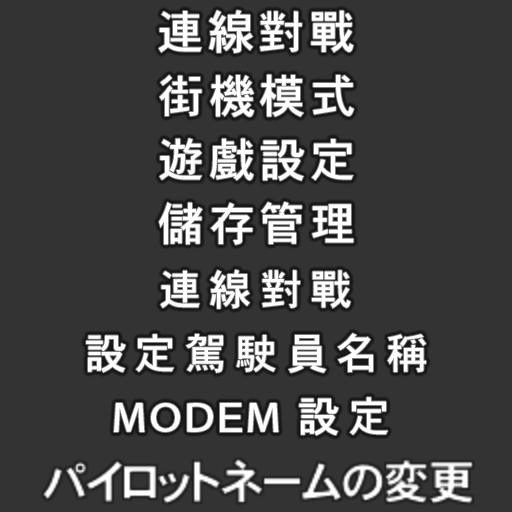
<style>
.page{position:relative;width:512px;height:512px;background:#333333}
.page>*{position:absolute;margin:0}
.t1{font:46px "HeiseiKakuGoStd-W5";letter-spacing:0.1em;color:#ffffff}
.t2{font:42px "HeiseiKakuGoStd-W5";letter-spacing:0.2em;color:#ffffff}
.t3{font:42px "HeiseiKakuGoStd-W5";letter-spacing:0.05em;color:#ffffff}
</style>
<div class="page">
<p class="t1" style="left:158px;top:10px;width:196px;height:43px">連線對戰</p>
<p class="t1" style="left:159px;top:74px;width:195px;height:43px">街機模式</p>
<p class="t1" style="left:159px;top:138px;width:195px;height:43px">遊戲設定</p>
<p class="t1" style="left:159px;top:202px;width:195px;height:43px">儲存管理</p>
<p class="t2" style="left:160px;top:269px;width:191px;height:40px">連線對戰</p>
<p class="t2" style="left:86px;top:333px;width:340px;height:40px">設定駕駛員名稱</p>
<p class="t3" style="left:114px;top:397px;width:274px;height:39px">MODEM <span class="t2">設定</span></p>
</div>
